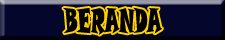
<style>
.page{position:relative;width:225px;height:40px;background:#04062b}
.page>*{position:absolute;margin:0}
.t1{font:33.3px "SnapITC-Regular";color:#000000;scale:0.5 1}
</style>
<div class="page">
<p class="t1" style="left:63px;top:7px;width:99px;height:28px">BERANDA</p>
</div>
